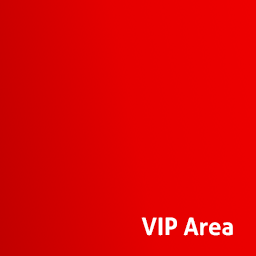
<style>
.page{position:relative;width:256px;height:256px}
.page>*{position:absolute;margin:0}
.t1{font:24px "Aller-Bold";color:#ffffff}
</style>
<div class="page">
<p class="t1" style="left:141px;top:217px;width:92px;height:19px">VIP Area</p>
</div>
